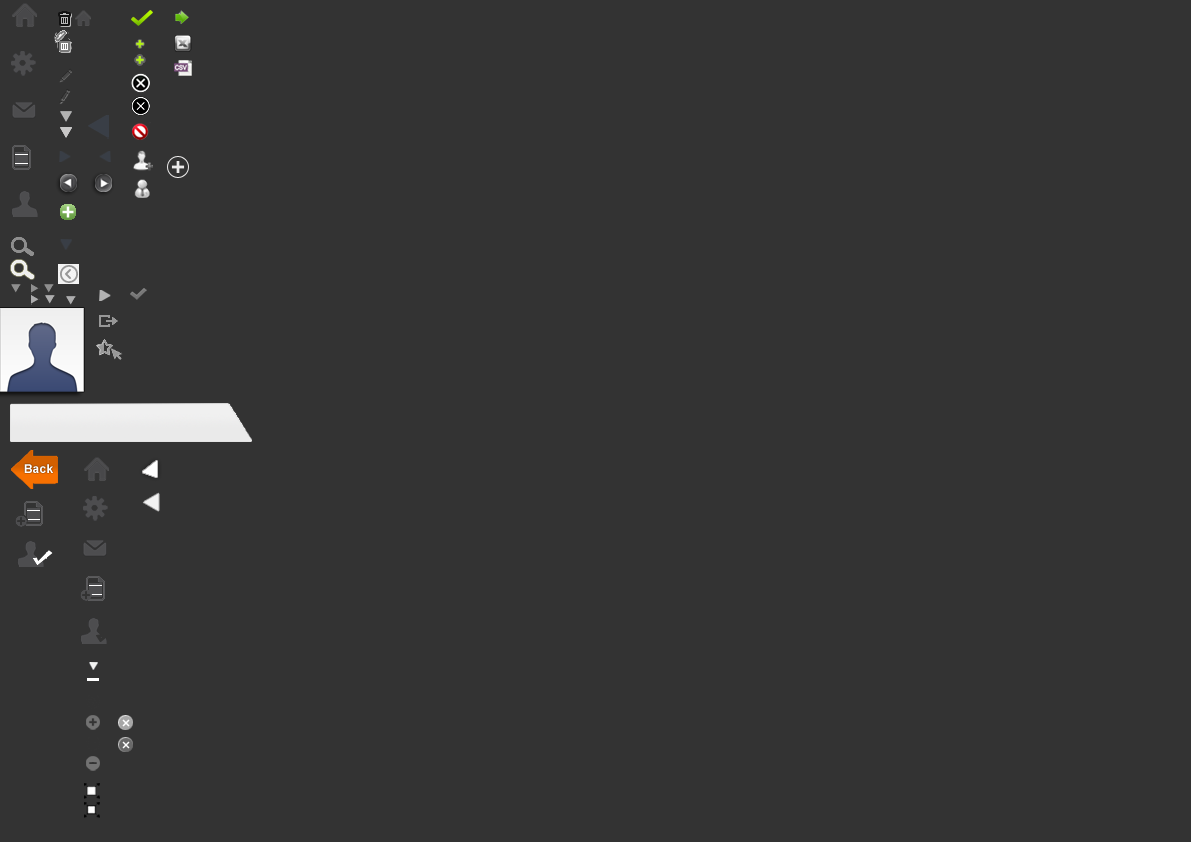
<style>
.page{position:relative;width:1191px;height:842px;background:#333333}
.page>*{position:absolute;margin:0}
.t1{font:12px "Arial-BoldMT";letter-spacing:0.02em;color:#ffffff}
</style>
<div class="page">
<p class="t1" style="left:24px;top:464px;width:29px;height:9px">Back</p>
</div>
